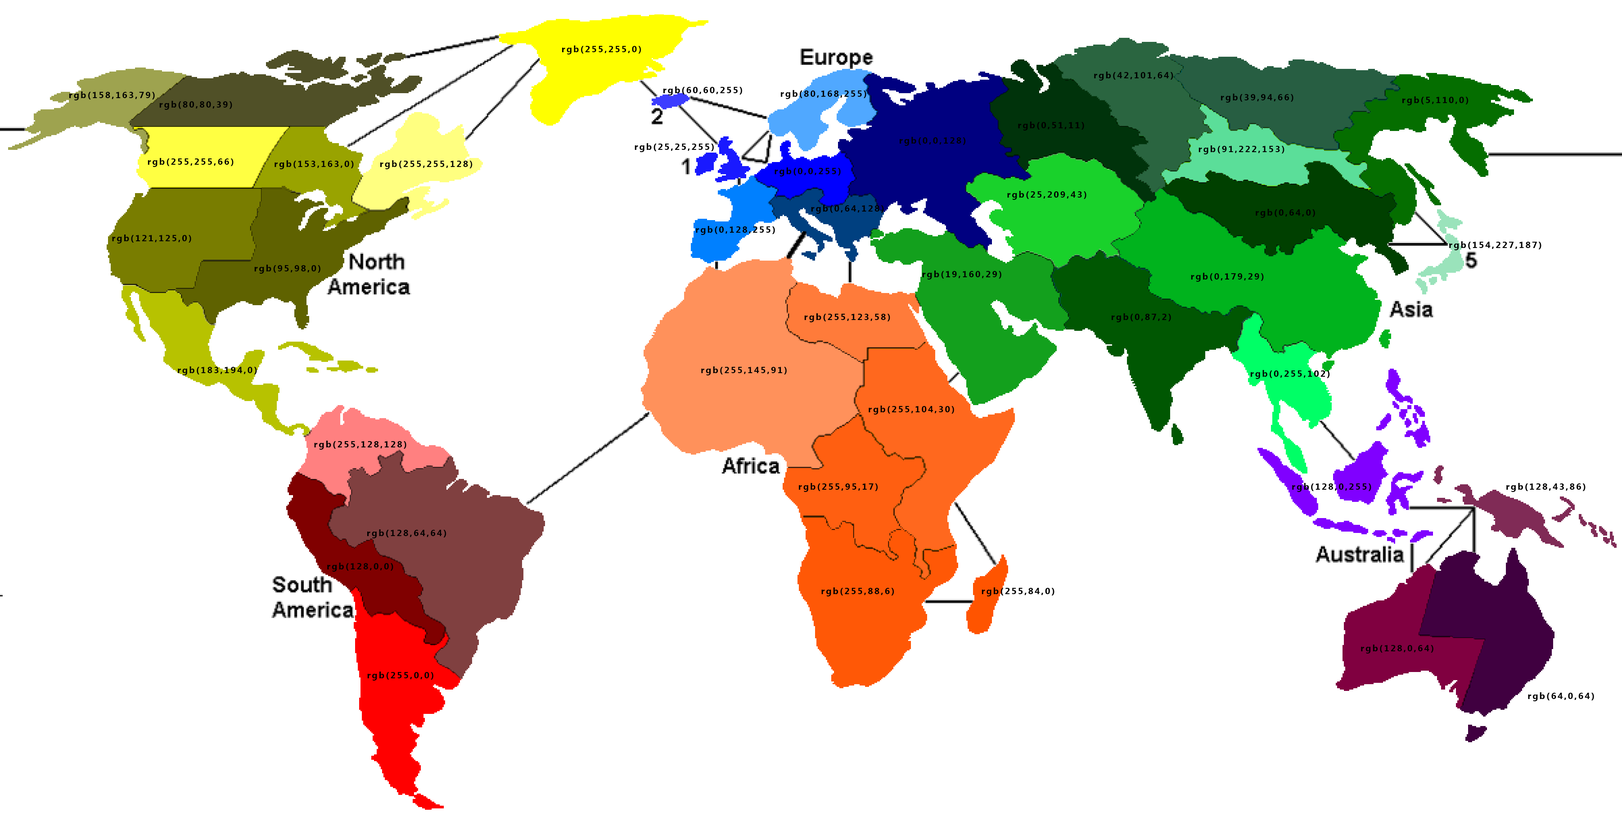
<style>
.page{position:relative;width:1622px;height:830px;background:#ffffff}
.page>*{position:absolute;margin:0}
.t1{font:9px "MicrosoftNewTaiLue-Bold";letter-spacing:0.15em;color:#000000}
</style>
<div class="page">
<p class="t1" style="left:562px;top:45px;width:79px;height:9px">rgb(255,255,0)</p>
<p class="t1" style="left:1094px;top:72px;width:79px;height:9px">rgb(42,101,64)</p>
<p class="t1" style="left:663px;top:86px;width:79px;height:9px">rgb(60,60,255)</p>
<p class="t1" style="left:69px;top:91px;width:86px;height:9px">rgb(158,163,79)</p>
<p class="t1" style="left:159px;top:101px;width:73px;height:9px">rgb(80,80,39)</p>
<p class="t1" style="left:781px;top:90px;width:85px;height:9px">rgb(80,168,255)</p>
<p class="t1" style="left:1221px;top:94px;width:72px;height:9px">rgb(39,94,66)</p>
<p class="t1" style="left:1402px;top:96px;width:66px;height:9px">rgb(5,110,0)</p>
<p class="t1" style="left:1018px;top:122px;width:66px;height:8px">rgb(0,51,11)</p>
<p class="t1" style="left:900px;top:137px;width:66px;height:9px">rgb(0,0,128)</p>
<p class="t1" style="left:634px;top:143px;width:80px;height:9px">rgb(25,25,255)</p>
<p class="t1" style="left:1198px;top:145px;width:86px;height:9px">rgb(91,222,153)</p>
<p class="t1" style="left:148px;top:158px;width:86px;height:9px">rgb(255,255,66)</p>
<p class="t1" style="left:274px;top:160px;width:80px;height:9px">rgb(153,163,0)</p>
<p class="t1" style="left:380px;top:160px;width:92px;height:9px">rgb(255,255,128)</p>
<p class="t1" style="left:774px;top:167px;width:67px;height:9px">rgb(0,0,255)</p>
<p class="t1" style="left:1007px;top:191px;width:79px;height:9px">rgb(25,209,43)</p>
<p class="t1" style="left:811px;top:205px;width:73px;height:9px">rgb(0,64,128)</p>
<p class="t1" style="left:1256px;top:209px;width:59px;height:9px">rgb(0,64,0)</p>
<p class="t1" style="left:696px;top:226px;width:79px;height:9px">rgb(0,128,255)</p>
<p class="t1" style="left:112px;top:234px;width:79px;height:9px">rgb(121,125,0)</p>
<p class="t1" style="left:1449px;top:241px;width:92px;height:9px">rgb(154,227,187)</p>
<p class="t1" style="left:254px;top:265px;width:66px;height:9px">rgb(95,98,0)</p>
<p class="t1" style="left:922px;top:270px;width:79px;height:9px">rgb(19,160,29)</p>
<p class="t1" style="left:1191px;top:273px;width:73px;height:9px">rgb(0,179,29)</p>
<p class="t1" style="left:804px;top:313px;width:86px;height:9px">rgb(255,123,58)</p>
<p class="t1" style="left:1112px;top:313px;width:59px;height:9px">rgb(0,87,2)</p>
<p class="t1" style="left:178px;top:366px;width:79px;height:9px">rgb(183,194,0)</p>
<p class="t1" style="left:701px;top:366px;width:86px;height:9px">rgb(255,145,91)</p>
<p class="t1" style="left:1251px;top:370px;width:79px;height:9px">rgb(0,255,102)</p>
<p class="t1" style="left:868px;top:405px;width:86px;height:9px">rgb(255,104,30)</p>
<p class="t1" style="left:314px;top:441px;width:92px;height:9px">rgb(255,128,128)</p>
<p class="t1" style="left:799px;top:483px;width:79px;height:9px">rgb(255,95,17)</p>
<p class="t1" style="left:1292px;top:483px;width:79px;height:9px">rgb(128,0,255)</p>
<p class="t1" style="left:1506px;top:483px;width:79px;height:9px">rgb(128,43,86)</p>
<p class="t1" style="left:367px;top:529px;width:79px;height:9px">rgb(128,64,64)</p>
<p class="t1" style="left:327px;top:562px;width:66px;height:10px">rgb(128,0,0)</p>
<p class="t1" style="left:821px;top:587px;width:73px;height:9px">rgb(255,88,6)</p>
<p class="t1" style="left:981px;top:587px;width:73px;height:9px">rgb(255,84,0)</p>
<p class="t1" style="left:1361px;top:644px;width:72px;height:9px">rgb(128,0,64)</p>
<p class="t1" style="left:367px;top:671px;width:66px;height:9px">rgb(255,0,0)</p>
<p class="t1" style="left:1528px;top:692px;width:66px;height:9px">rgb(64,0,64)</p>
</div>
